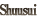
<style>
.page{position:relative;width:37px;height:19px;background:#ffffff}
.page>*{position:absolute;margin:0}
.t1{font:14px "RyuminPro-ExBold";letter-spacing:-0.1em;color:#4a3f32;font-weight:bold;scale:0.8 1}
</style>
<div class="page">
<p class="t1" style="left:0px;top:4px;width:37px;height:12px">Shuusui</p>
</div>
